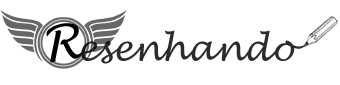
<style>
.page{position:relative;width:340px;height:85px;background:#ffffff}
.page>*{position:absolute;margin:0}
.t1{font:48px "LucidaHandwriting-Italic";color:#030000}
.t2{font:35px "LucidaHandwriting-Italic";color:#2d2b2b}
</style>
<div class="page">
<p class="t1" style="left:46px;top:23px;width:36px;height:40px">R</p>
<p class="t2" style="left:81px;top:30px;width:224px;height:34px">esenhando</p>
</div>
